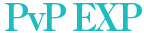
<style>
.page{position:relative;width:144px;height:33px;background:#ffffff}
.page>*{position:absolute;margin:0}
.t1{font:37px "RyuminPro-ExBold";letter-spacing:-0.1em;color:#1cbdc0}
</style>
<div class="page">
<p class="t1" style="left:5px;top:3px;width:137px;height:28px">PvP EXP</p>
</div>
